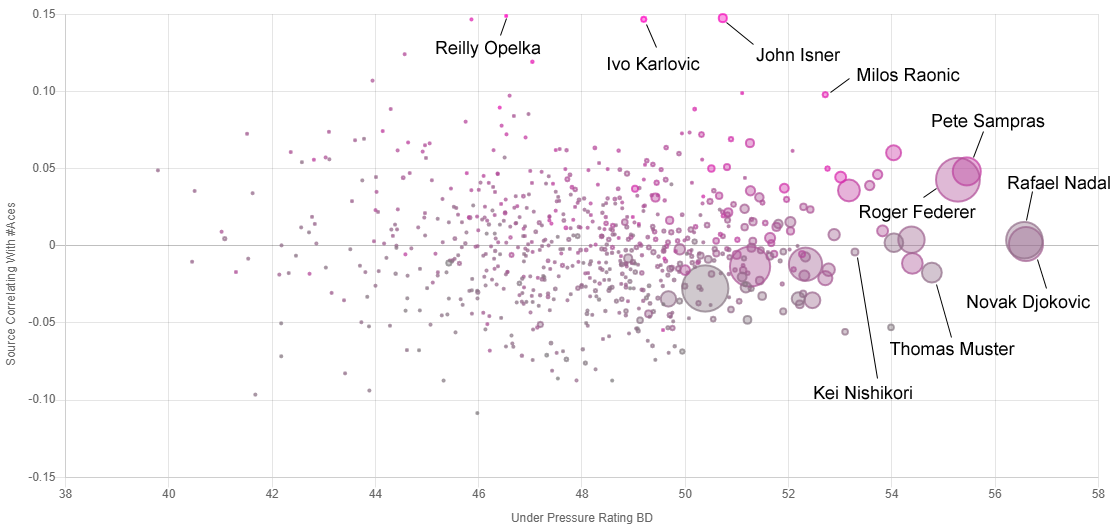
<style>
.page{position:relative;width:1111px;height:530px;background:#ffffff}
.page>*{position:absolute;margin:0}
.t1{font:18px "ArialMT";color:#000000}
</style>
<div class="page">
<p class="t1" style="left:436px;top:40px;width:105px;height:18px">Reilly Opelka</p>
<p class="t1" style="left:756px;top:48px;width:85px;height:14px">John Isner</p>
<p class="t1" style="left:608px;top:57px;width:92px;height:14px">Ivo Karlovic</p>
<p class="t1" style="left:857px;top:68px;width:103px;height:14px">Milos Raonic</p>
<p class="t1" style="left:932px;top:113px;width:113px;height:18px">Pete Sampras</p>
<p class="t1" style="left:1008px;top:175px;width:102px;height:15px">Rafael Nadal</p>
<p class="t1" style="left:860px;top:205px;width:116px;height:17px">Roger Federer</p>
<p class="t1" style="left:967px;top:295px;width:123px;height:17px">Novak Djokovic</p>
<p class="t1" style="left:890px;top:342px;width:125px;height:14px">Thomas Muster</p>
<p class="t1" style="left:814px;top:386px;width:98px;height:14px">Kei Nishikori</p>
</div>
